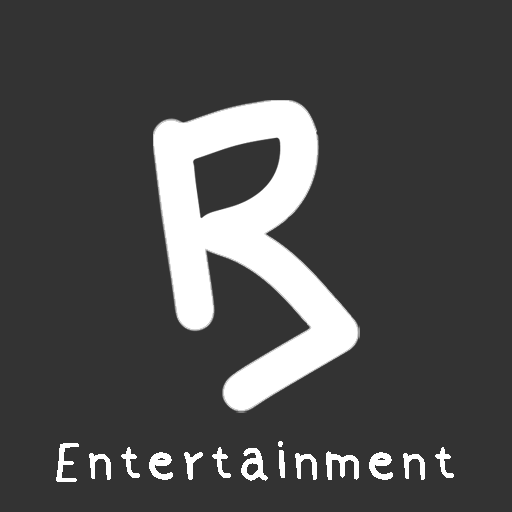
<style>
.page{position:relative;width:512px;height:512px;background:#333333}
.page>*{position:absolute;margin:0}
.t1{font:76.2px "Brutal_bounce-Regular";letter-spacing:0.02em;color:#ffffff}
</style>
<div class="page">
<p class="t1" style="left:56px;top:441px;width:398px;height:41px">Entertainment</p>
</div>
